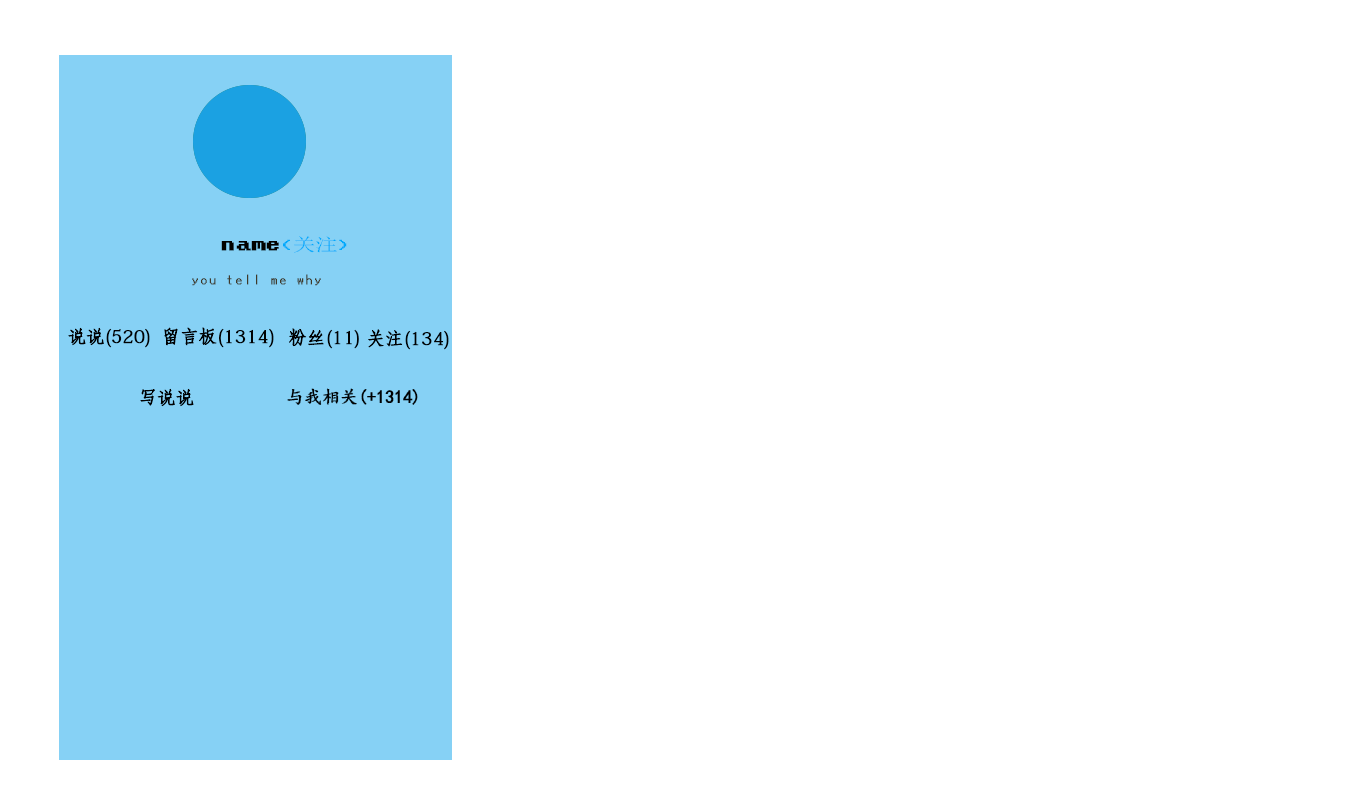
<style>
.page{position:relative;width:1366px;height:796px;background:#ffffff}
.page>*{position:absolute;margin:0}
.t1{font:24px "Terminal";color:#020200;font-weight:bold}
.t2{font:18px "Terminal";color:#01aafc}
.t3{font:14px "Terminal";color:#3f3a29;font-weight:bold}
.t4{font:18px "AdobeFangsongStd-Regular";color:#000102;font-weight:bold}
.t5{font:18px "¿¬Ìå";color:#000102;font-weight:bold}
</style>
<div class="page">
<p class="t1" style="left:221px;top:236px;width:126px;height:17px">name<span class="t2">(关注)</span></p>
<p class="t3" style="left:192px;top:274px;width:129px;height:12px">you tell me why</p>
<p class="t4" style="left:68px;top:327px;width:82px;height:21px">说说(520)</p>
<p class="t4" style="left:164px;top:327px;width:110px;height:21px">留言板(1314)</p>
<p class="t4" style="left:289px;top:328px;width:70px;height:21px">粉丝(11)</p>
<p class="t4" style="left:368px;top:329px;width:81px;height:21px">关注(134)</p>
<p class="t4" style="left:140px;top:388px;width:54px;height:19px">写说说</p>
<p class="t5" style="left:287px;top:388px;width:131px;height:17px">与我相关(+1314)</p>
</div>
